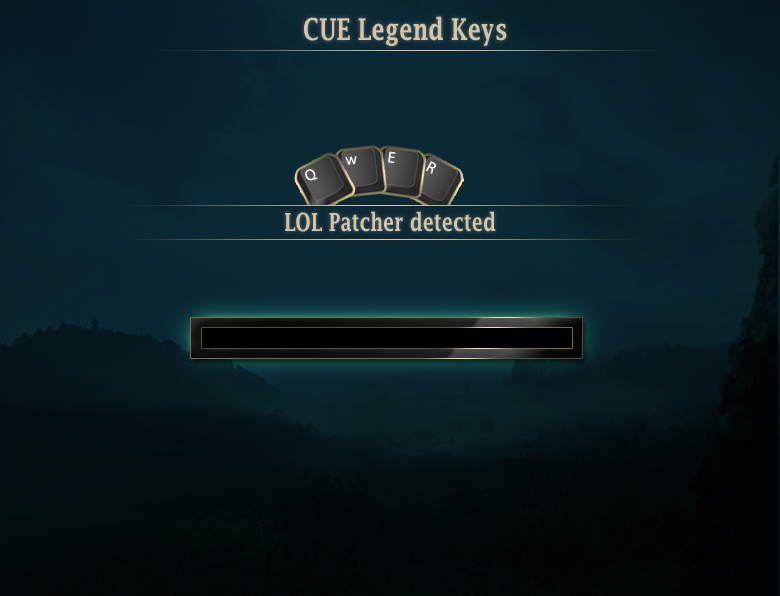
<style>
.page{position:relative;width:780px;height:596px}
.page>*{position:absolute;margin:0}
.t1{font:30px "LucidaFax-Demi";color:#d7c4a4;scale:0.75 1}
.t2{font:15.7px "MyriadPro-Regular";color:#ffffff}
.t3{font:25px "LucidaFax-Demi";color:#d7c4a4;scale:0.75 1}
</style>
<div class="page">
<p class="t1" style="left:304px;top:16px;width:203px;height:30px">CUE Legend Keys</p>
<p class="t2" style="left:345px;top:156px;width:12px;height:9px;rotate:-6deg">w</p>
<p class="t2" style="left:388px;top:151px;width:8px;height:13px;rotate:8deg">E</p>
<p class="t2" style="left:426px;top:161px;width:10px;height:13px;rotate:28deg">R</p>
<p class="t2" style="left:305px;top:169px;width:13px;height:12px;rotate:-28deg">Q</p>
<p class="t3" style="left:285px;top:211px;width:211px;height:21px">LOL Patcher detected</p>
</div>
